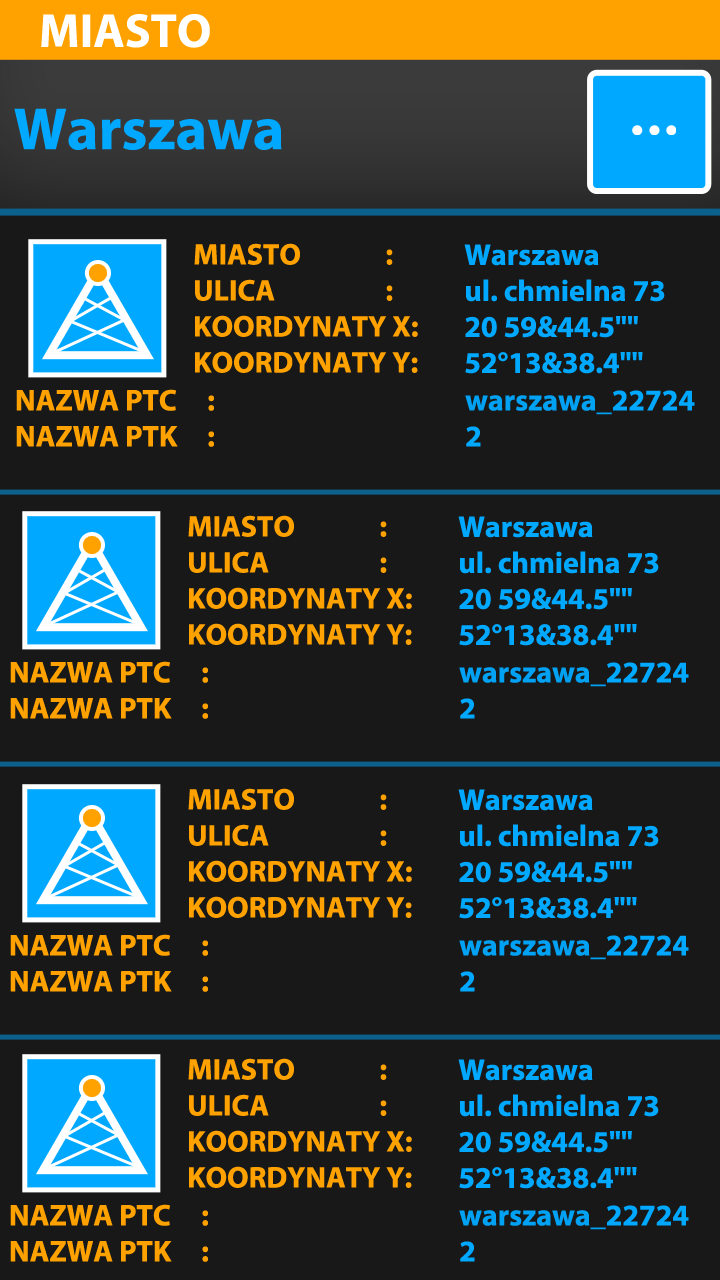
<style>
.page{position:relative;width:720px;height:1280px;background:#181818}
.page>*{position:absolute;margin:0}
.t1{font:48px "MyriadPro-Bold";color:#ffffff}
.t2{font:60px "MyriadPro-Bold";color:#00a8ff}
.t3{font:30px "MyriadPro-Bold";color:#ffa200}
.t4{font:30px "MyriadPro-Bold";color:#00a8ff}
.t5{font:30px "MyriadPro-Bold";color:#01a1f4}
</style>
<div class="page">
<p class="t1" style="left:41px;top:14px;width:169px;height:34px">MIASTO</p>
<p class="t2" style="left:14px;top:108px;width:268px;height:42px">Warszawa</p>
<p class="t3" style="left:194px;top:243px;width:224px;height:130px">MIASTO      :<br>ULICA      :<br>KOORDYNATY X:<br>KOORDYNATY Y:</p>
<p class="t4" style="left:464px;top:244px;width:201px;height:130px">Warszawa<br>ul. chmielna 73<br>20 59&amp;44.5""<br>52°13&amp;38.4""</p>
<p class="t3" style="left:16px;top:389px;width:679px;height:58px">NAZWA PTC   :           <span class="t5">warszawa_</span><span class="t4">22724<br></span>NAZWA PTK   :           <span class="t4">2</span></p>
<p class="t3" style="left:188px;top:515px;width:224px;height:130px">MIASTO      :<br>ULICA      :<br>KOORDYNATY X:<br>KOORDYNATY Y:</p>
<p class="t4" style="left:458px;top:516px;width:201px;height:130px">Warszawa<br>ul. chmielna 73<br>20 59&amp;44.5""<br>52°13&amp;38.4""</p>
<p class="t3" style="left:10px;top:661px;width:679px;height:58px">NAZWA PTC   :           <span class="t5">warszawa_</span><span class="t4">22724<br></span>NAZWA PTK   :           <span class="t4">2</span></p>
<p class="t3" style="left:188px;top:788px;width:224px;height:130px">MIASTO      :<br>ULICA      :<br>KOORDYNATY X:<br>KOORDYNATY Y:</p>
<p class="t4" style="left:458px;top:789px;width:201px;height:130px">Warszawa<br>ul. chmielna 73<br>20 59&amp;44.5""<br>52°13&amp;38.4""</p>
<p class="t3" style="left:10px;top:934px;width:679px;height:58px">NAZWA PTC   :           <span class="t5">warszawa_</span><span class="t4">22724<br></span>NAZWA PTK   :           <span class="t4">2</span></p>
<p class="t3" style="left:188px;top:1058px;width:224px;height:130px">MIASTO      :<br>ULICA      :<br>KOORDYNATY X:<br>KOORDYNATY Y:</p>
<p class="t4" style="left:458px;top:1059px;width:201px;height:130px">Warszawa<br>ul. chmielna 73<br>20 59&amp;44.5""<br>52°13&amp;38.4""</p>
<p class="t3" style="left:10px;top:1204px;width:679px;height:58px">NAZWA PTC   :           <span class="t5">warszawa_</span><span class="t4">22724<br></span>NAZWA PTK   :           <span class="t4">2</span></p>
</div>
